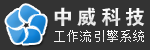
<style>
.page{position:relative;width:150px;height:50px;background:#333333}
.page>*{position:absolute;margin:0}
.t1{font:20px "FZDHTJW--GB1-0";letter-spacing:0.2em;color:#dbdbdb}
.t2{font:12px "SimSun";letter-spacing:0.1em;color:#f2f2f2}
</style>
<div class="page">
<p class="t1" style="left:54px;top:7px;width:91px;height:20px">中威科技</p>
<p class="t2" style="left:54px;top:30px;width:90px;height:12px">工作流引擎系统</p>
</div>
